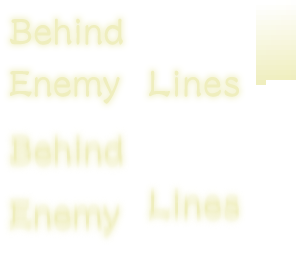
<style>
.page{position:relative;width:296px;height:256px;background:#ffffff}
.page>*{position:absolute;margin:0}
.t1{font:48.4px/52px "DFLeiShoStd-W5";letter-spacing:0.01em;color:#efeebe;scale:0.82 1}
.t2{font:48.4px/52px "DFLeiShoStd-W5";letter-spacing:0.025em;color:#efeebe;scale:0.82 1}
</style>
<div class="page">
<p class="t1" style="left:10px;top:18px;width:229px;height:86px">Behind<br>Enemy  <span class="t2">Lines</span></p>
</div>
